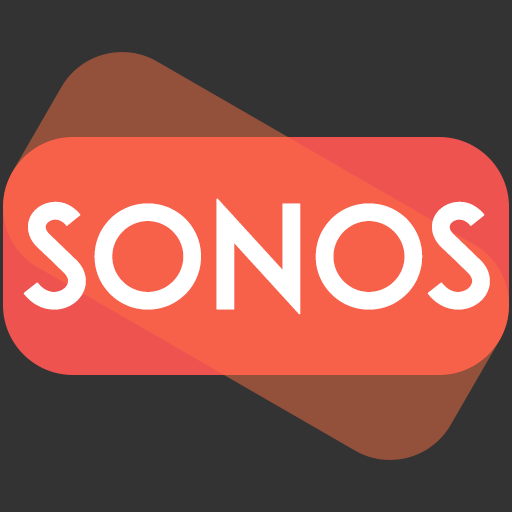
<style>
.page{position:relative;width:512px;height:512px;background:#333333}
.page>*{position:absolute;margin:0}
.t1{font:141.7px "ADAM.CGPRO";letter-spacing:-0.04em;color:#ffffff;font-weight:bold}
</style>
<div class="page">
<p class="t1" style="left:23px;top:198px;width:467px;height:117px">SONOS</p>
</div>
